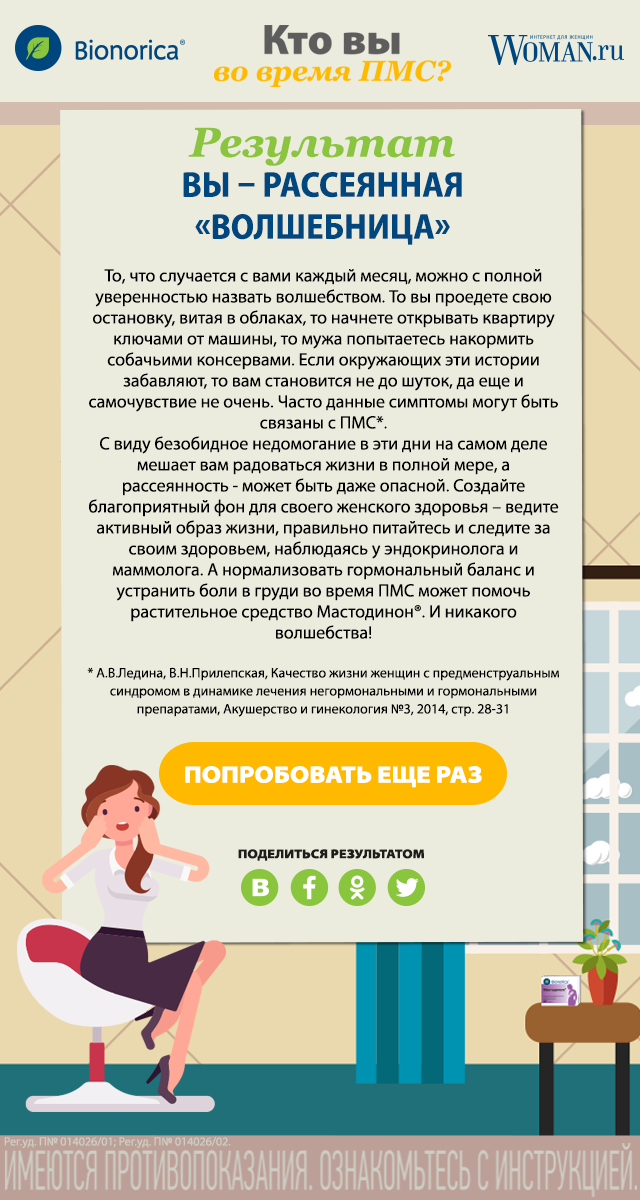
<style>
.page{position:relative;width:640px;height:1200px;background:#ececde}
.page>*{position:absolute;margin:0}
.t1{font:41.5px "Georgia-BoldItalic";color:#8bc53f}
.t2{font:36px/42px "MyriadPro-BoldSemiCn";color:#00467f;text-transform:uppercase}
.t3{font:18px/21px "MyriadPro-Regular";color:#000000}
.t4{font:14px/18px "MyriadPro-Regular";color:#000000}
.t5{font:24px "MyriadPro-BlackSemiExt";color:#ffffff;text-transform:uppercase}
.t6{font:12.9px "MyriadPro-BlackSemiExt";color:#1d1d1b;text-transform:uppercase}
.t7{font:12px "MyriadPro-Regular";color:#cecec4}
</style>
<div class="page">
<p class="t1" style="left:188px;top:127px;width:267px;height:39px">Результат</p>
<p class="t2" style="left:183px;top:172px;width:279px;height:73px;text-align:center">Вы – рассеянная «волшебница»</p>
<p class="t3" style="left:87px;top:269px;width:472px;height:448px;text-align:center">То, что случается с вами каждый месяц, можно с полной уверенностью назвать волшебством. То вы проедете свою остановку, витая в облаках, то начнете открывать квартиру ключами от машины, то мужа попытаетесь накормить собачьими консервами. Если окружающих эти истории забавляют, то вам становится не до шуток, да еще и самочувствие не очень. Часто данные симптомы могут быть связаны с ПМС*.<br>С виду безобидное недомогание в эти дни на самом деле мешает вам радоваться жизни в полной мере, а рассеянность - может быть даже опасной. Создайте благоприятный фон для своего женского здоровья – ведите активный образ жизни, правильно питайтесь и следите за своим здоровьем, наблюдаясь у эндокринолога и маммолога. А нормализовать гормональный баланс и устранить боли в груди во время ПМС может помочь растительное средство Мастодинон®. И никакого волшебства!<br><br><span class="t4">* А.В.Ледина, В.Н.Прилепская, Качество жизни женщин с предменструальным синдромом в динамике лечения негормональными и гормональными препаратами, Акушерство и гинекология №3, 2014, стр. 28-31</span></p>
<p class="t5" style="left:185px;top:766px;width:297px;height:22px">попробовать еще раз</p>
<p class="t6" style="left:238px;top:849px;width:186px;height:12px">поделиться результатом</p>
<p class="t7" style="left:4px;top:1137px;width:227px;height:12px">Рег.уд. П№ 014026/01; Рег.уд. П№ 014026/02.</p>
</div>
